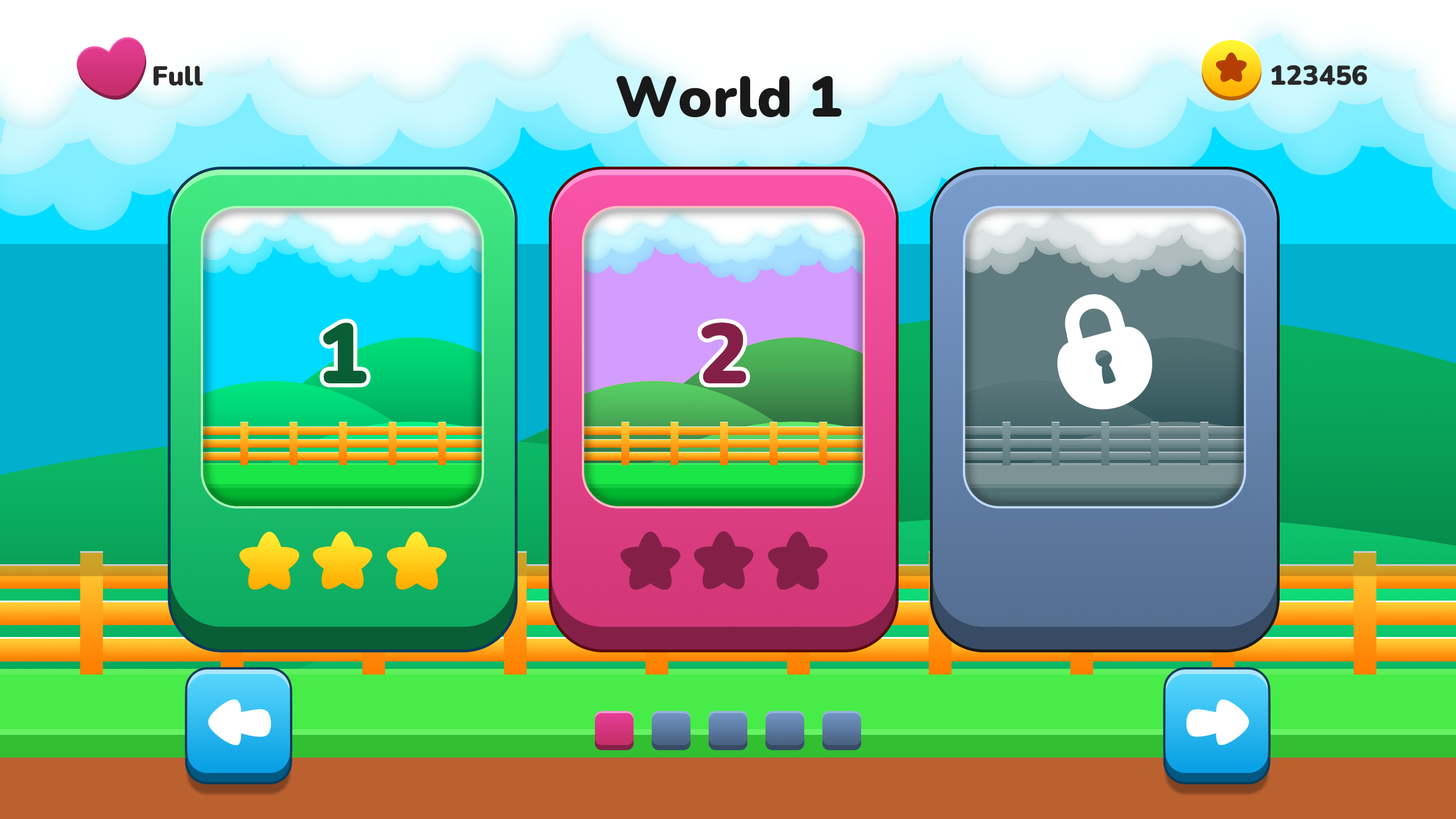
<style>
.page{position:relative;width:1456px;height:819px}
.page>*{position:absolute;margin:0}
.t1{font:27.3px "Nunito-Black";color:#282828}
.t2{font:56.9px "Nunito-Black";color:#191919}
.t3{font:84.9px "Nunito-Black";color:#0a5e35}
.t4{font:84.9px "Nunito-Black";color:#842048}
</style>
<div class="page">
<p class="t1" style="left:154px;top:65px;width:49px;height:21px">Full</p>
<p class="t1" style="left:1271px;top:65px;width:96px;height:20px">123456</p>
<p class="t2" style="left:617px;top:76px;width:225px;height:41px">World 1</p>
<p class="t3" style="left:323px;top:322px;width:44px;height:61px">1</p>
<p class="t4" style="left:701px;top:322px;width:45px;height:61px">2</p>
</div>
